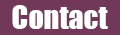
<style>
.page{position:relative;width:120px;height:35px;background:#713859}
.page>*{position:absolute;margin:0}
.t1{font:30px "Impact";color:#ffffff}
</style>
<div class="page">
<p class="t1" style="left:12px;top:5px;width:96px;height:24px">Contact</p>
</div>
